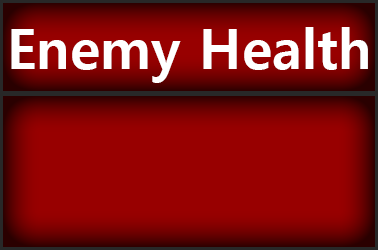
<style>
.page{position:relative;width:378px;height:250px;background:#980000}
.page>*{position:absolute;margin:0}
.t1{font:55px "MalgunGothicBold";color:#ffffff}
</style>
<div class="page">
<p class="t1" style="left:11px;top:27px;width:357px;height:56px">Enemy Health</p>
</div>
